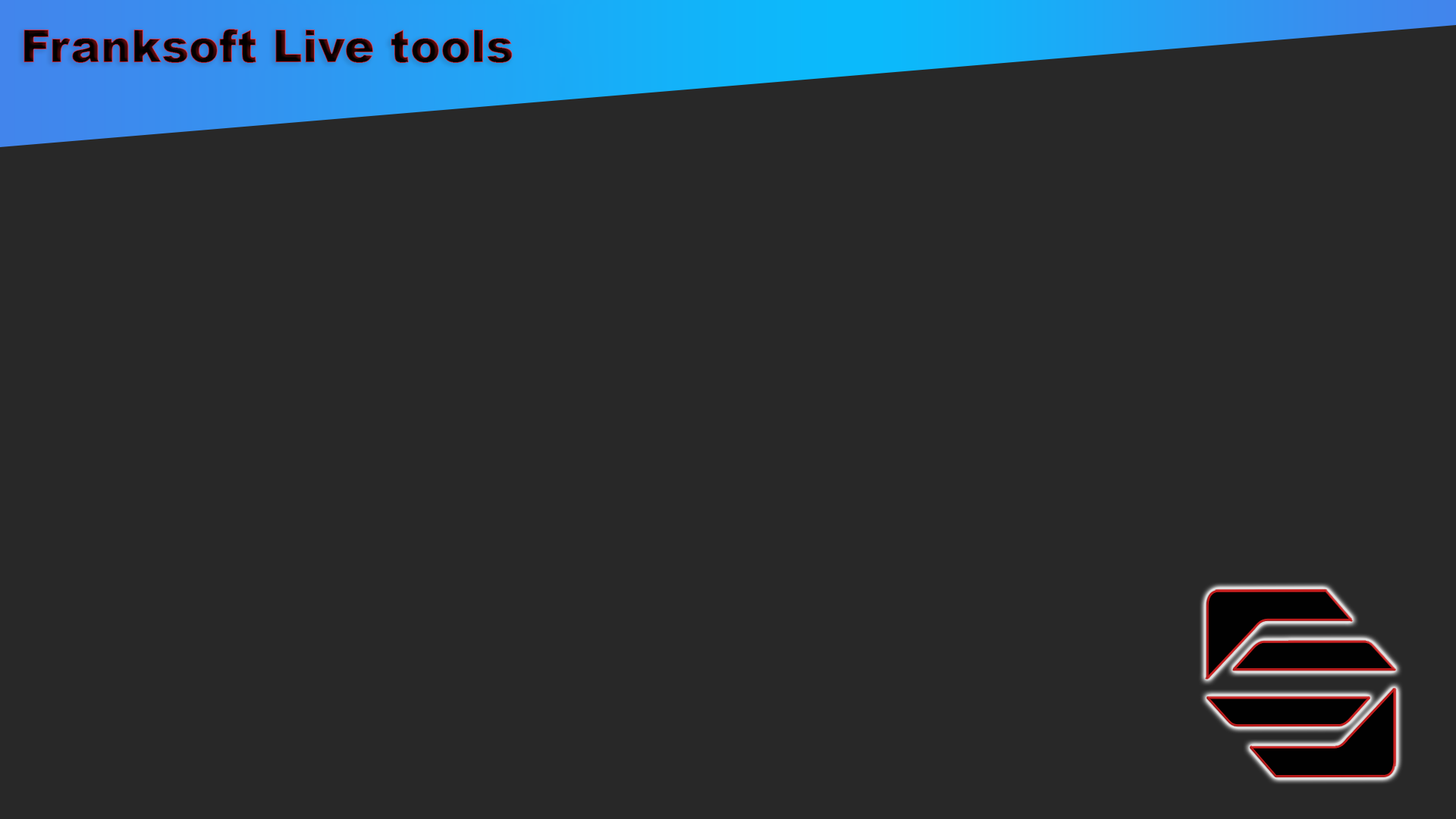
<style>
.page{position:relative;width:1456px;height:819px;background:#282828}
.page>*{position:absolute;margin:0}
.t1{font:45.5px "Arial-Black"}
</style>
<div class="page">
<p class="t1" style="left:24px;top:29px;width:489px;height:34px">Franksoft Live tools</p>
</div>
